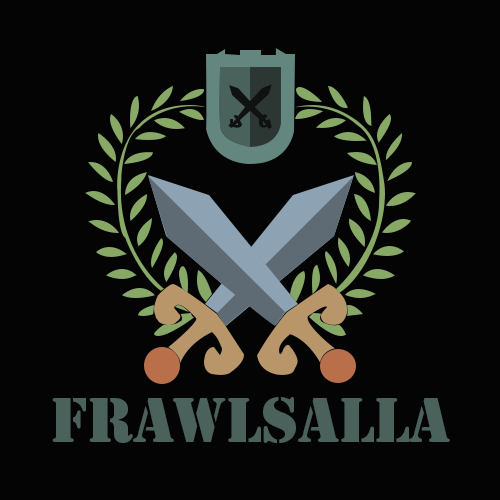
<style>
.page{position:relative;width:500px;height:500px;background:#040404}
.page>*{position:absolute;margin:0}
.t1{font:58.8px "StencilStd";color:#4a615c}
</style>
<div class="page">
<p class="t1" style="left:52px;top:397px;width:398px;height:46px">FRAWLSALLA</p>
</div>
